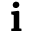
<style>
.page{position:relative;width:32px;height:32px;background:#ffffff}
.page>*{position:absolute;margin:0}
.t1{font:35.4px "Merriweather-Bold";letter-spacing:0.014em;color:#000000}
</style>
<div class="page">
<p class="t1" style="left:11px;top:1px;width:11px;height:30px">i</p>
</div>
